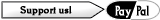
<style>
.page{position:relative;width:160px;height:20px;background:#ffffff}
.page>*{position:absolute;margin:0}
.t1{font:9.2px "TRGoodfishBold";color:#000000;font-weight:bold;scale:1.35 1}
</style>
<div class="page">
<p class="t1" style="left:20px;top:6px;width:52px;height:10px">Support us!</p>
</div>
